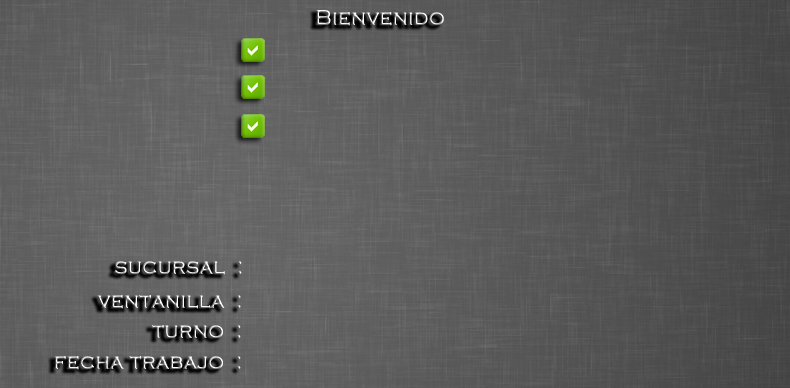
<style>
.page{position:relative;width:790px;height:388px}
.page>*{position:absolute;margin:0}
.t1{font:21.1px "CopperplateGothic-Light";font-weight:bold}
</style>
<div class="page">
<p class="t1" style="left:316px;top:10px;width:128px;height:16px">Bienvenido</p>
<p class="t1" style="left:114px;top:261px;width:128px;height:14px">sucursal  :</p>
<p class="t1" style="left:97px;top:295px;width:144px;height:14px">ventanilla  :</p>
<p class="t1" style="left:151px;top:325px;width:90px;height:14px">turno  :</p>
<p class="t1" style="left:54px;top:356px;width:187px;height:14px">fecha trabajo  :</p>
</div>
